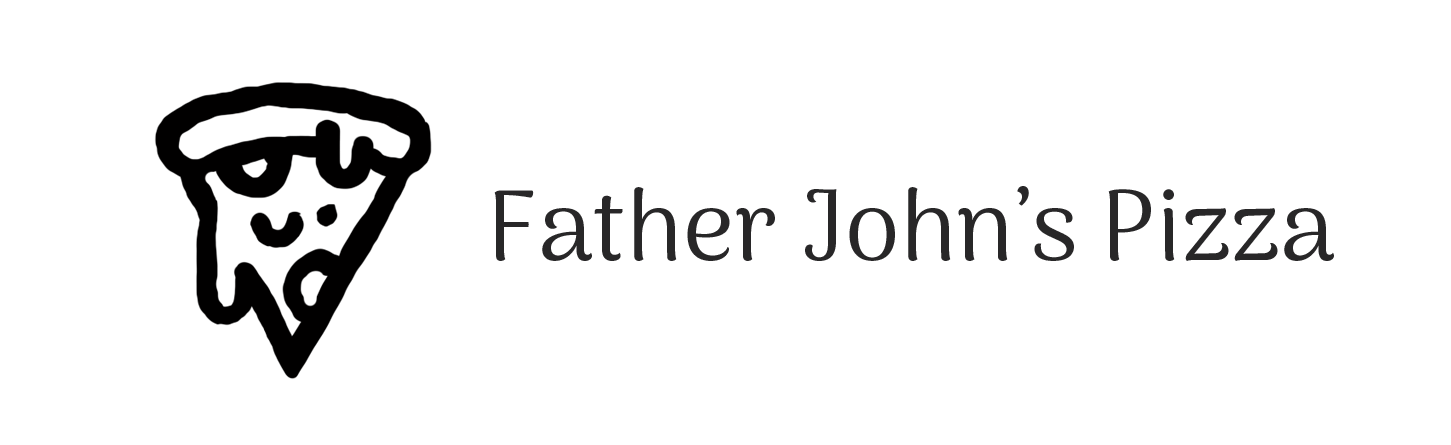
<style>
.page{position:relative;width:1451px;height:445px;background:#ffffff}
.page>*{position:absolute;margin:0}
.t1{font:100px "ArimaKoshi-Regular";color:#282728}
</style>
<div class="page">
<p class="t1" style="left:494px;top:186px;width:840px;height:75px">Father John’s Pizza</p>
</div>
